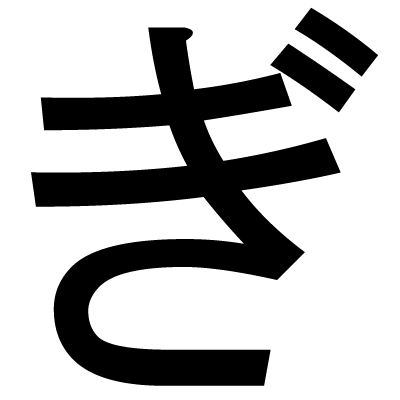
<style>
.page{position:relative;width:400px;height:400px;background:#ffffff}
.page>*{position:absolute;margin:0}
.t1{font:416.7px "MS-PGothic";color:#000000}
</style>
<div class="page">
<p class="t1" style="left:31px;top:7px;width:347px;height:379px">ぎ</p>
</div>
